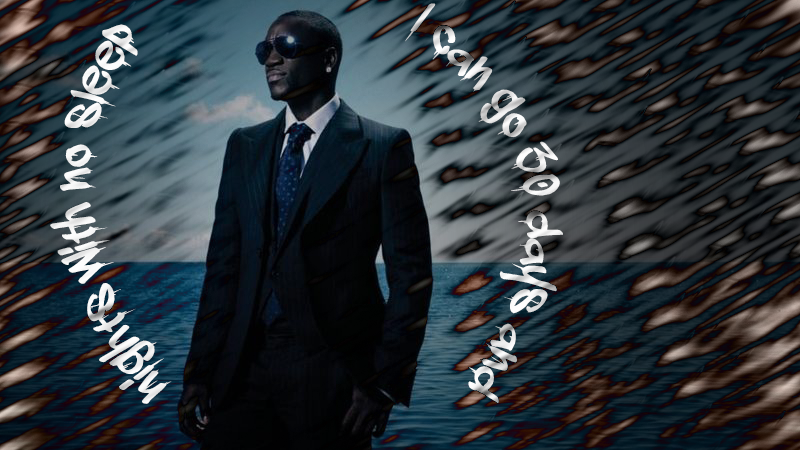
<style>
.page{position:relative;width:800px;height:450px}
.page>*{position:absolute;margin:0}
.t1{font:62.5px "adrippingmarker"}
.t2{font:62.5px "adrippingmarker";color:#fefefe}
</style>
<div class="page">
<p class="t1" style="left:405px;top:3px;width:158px;height:401px">I can go 30 days and</p>
<p class="t2" style="left:50px;top:24px;width:122px;height:380px">nights with no sleep</p>
</div>
